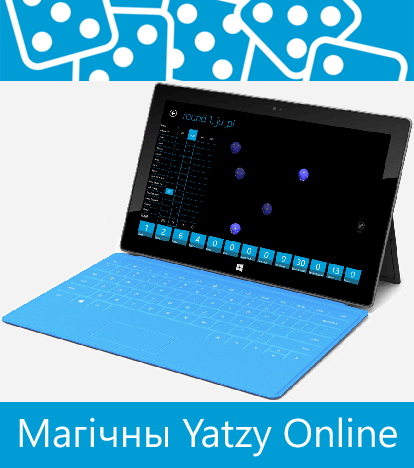
<style>
.page{position:relative;width:414px;height:468px;background:#f3f3f3}
.page>*{position:absolute;margin:0}
.t1{font:40px "SegoeWP";color:#ffffff}
</style>
<div class="page">
<p class="t1" style="left:19px;top:417px;width:378px;height:40px">Магічны Yatzy Online</p>
</div>
